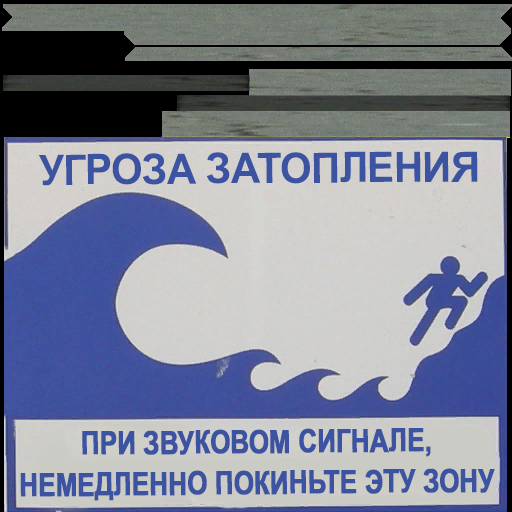
<style>
.page{position:relative;width:512px;height:512px}
.page>*{position:absolute;margin:0}
.t1{font:42px "Arial-BoldMT";letter-spacing:-0.02em;color:#3b53a0}
.t2{font:32px/41px "Arial-BoldMT";letter-spacing:-0.02em;color:#3b53a0;font-weight:bold;scale:0.81 1}
</style>
<div class="page">
<p class="t1" style="left:38px;top:151px;width:440px;height:35px">УГРОЗА ЗАТОПЛЕНИЯ</p>
<p class="t2" style="left:20px;top:428px;width:475px;height:73px;text-align:center;rotate:-1deg">ПРИ ЗВУКОВОМ СИГНАЛЕ,<br>НЕМЕДЛЕННО ПОКИНЬТЕ ЭТУ ЗОНУ</p>
</div>
